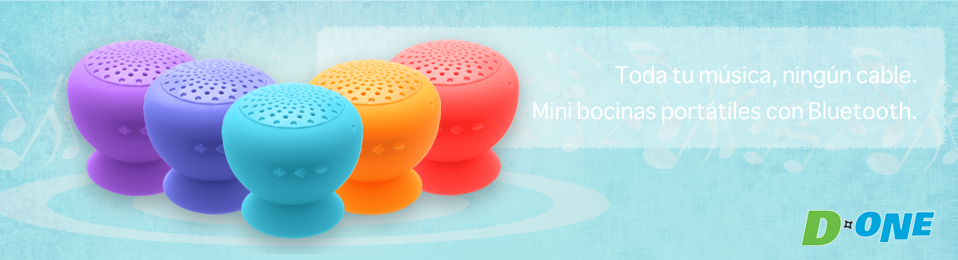
<style>
.page{position:relative;width:958px;height:260px}
.page>*{position:absolute;margin:0}
.t1{font:22.2px/35.3px "Sathu";color:#ffffff}
</style>
<div class="page">
<p class="t1" style="left:533px;top:65px;width:384px;height:59px;text-align:right">Toda tu música, ningún cable.<br>Mini bocinas portátiles con Bluetooth.</p>
</div>
